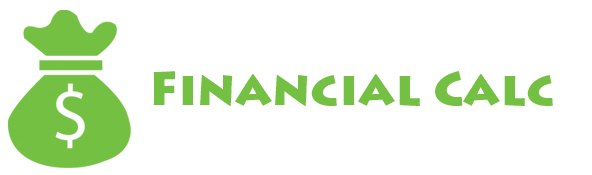
<style>
.page{position:relative;width:592px;height:175px;background:#ffffff}
.page>*{position:absolute;margin:0}
.t1{font:48px "LithosPro-Black";color:#74c043}
</style>
<div class="page">
<p class="t1" style="left:153px;top:71px;width:400px;height:35px">Financial Calc</p>
</div>
